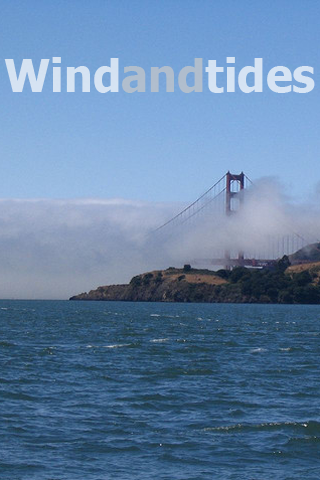
<style>
.page{position:relative;width:320px;height:480px}
.page>*{position:absolute;margin:0}
.t1{font:45px "Tahoma-Bold";color:#d5e2f2}
</style>
<div class="page">
<p class="t1" style="left:4px;top:57px;width:311px;height:36px">Windandtides</p>
</div>
